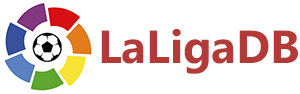
<style>
.page{position:relative;width:300px;height:94px;background:#ffffff}
.page>*{position:absolute;margin:0}
.t1{font:46.3px "MicrosoftPhagsPa-Bold";color:#b33a36}
</style>
<div class="page">
<p class="t1" style="left:101px;top:29px;width:197px;height:45px">LaLigaDB</p>
</div>
